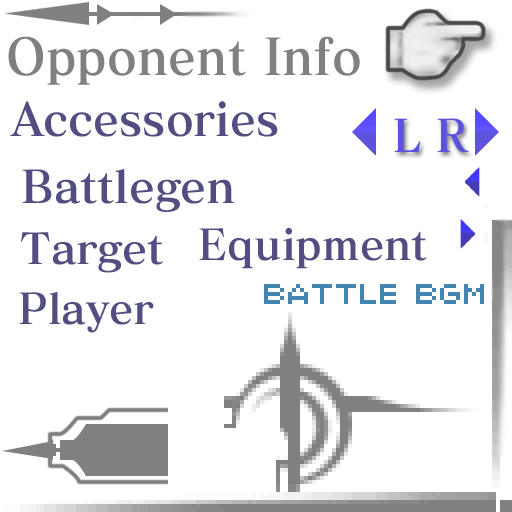
<style>
.page{position:relative;width:512px;height:512px;background:#ffffff}
.page>*{position:absolute;margin:0}
.t1{font:50.5px "MatisseElegantoPro-BEdit";color:#808080;scale:0.94 1}
.t2{font:45.7px "MatisseElegantoPro-BEdit";color:#524e82;scale:0.97 1}
.t3{font:44.7px "MatisseElegantoPro-BEdit";color:#5d52dc;scale:0.95 1}
.t4{font:44.8px "MatisseElegantoPro-BEdit";color:#524e82}
.t5{font:42.3px "MatisseElegantoPro-BEdit";color:#524e82}
</style>
<div class="page">
<p class="t1" style="left:8px;top:36px;width:352px;height:49px">Opponent Info</p>
<p class="t2" style="left:10px;top:101px;width:268px;height:36px">Accessories</p>
<p class="t3" style="left:394px;top:118px;width:27px;height:35px">L</p>
<p class="t3" style="left:437px;top:118px;width:32px;height:34px">R</p>
<p class="t4" style="left:22px;top:169px;width:212px;height:43px">Battlegen</p>
<p class="t5" style="left:21px;top:232px;width:142px;height:41px">Target</p>
<p class="t5" style="left:199px;top:227px;width:228px;height:42px">Equipment</p>
<p class="t5" style="left:19px;top:291px;width:135px;height:42px">Player</p>
</div>
